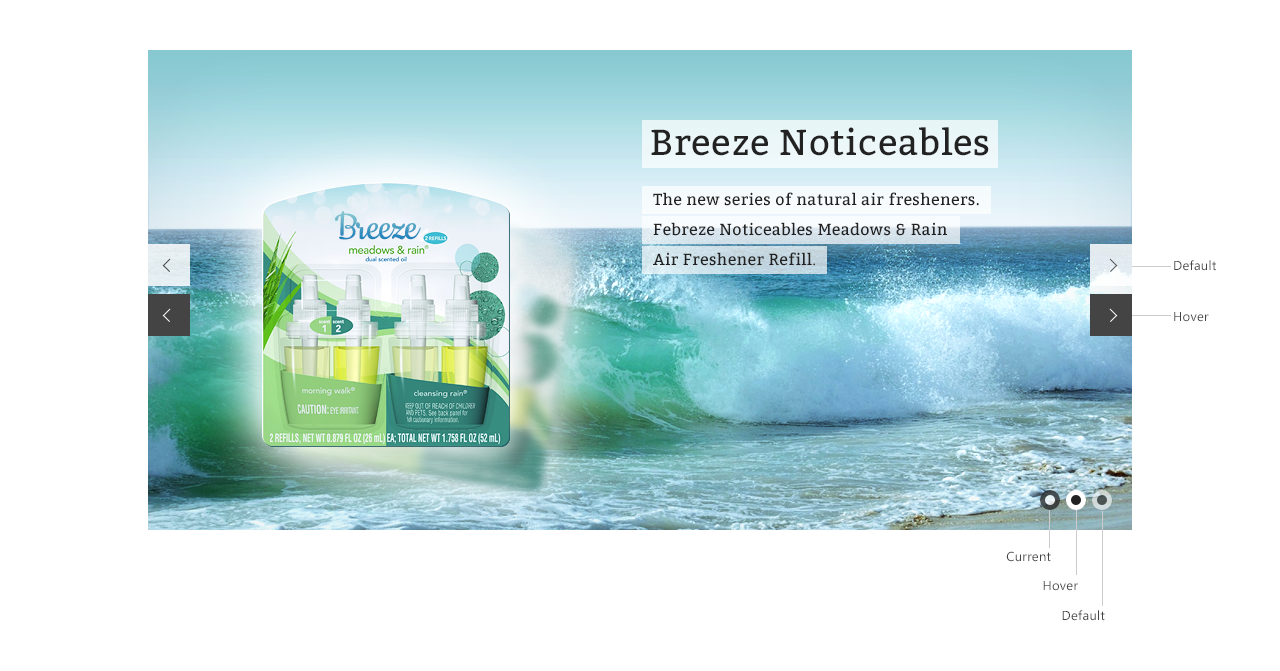
<style>
.page{position:relative;width:1280px;height:671px;background:#ffffff}
.page>*{position:absolute;margin:0}
.t1{font:36px "Bitter-Regular";letter-spacing:0.025em;color:#222222}
.t2{font:16px/30px "Bitter-Regular";letter-spacing:0.025em;color:#222222}
.t3{font:16px/30px "MinionPro-Regular";letter-spacing:0.025em;color:#222222}
.t4{font:45px "Cookie-Regular"}
.t5{font:13px "SegoeUI";letter-spacing:0.025em;color:#444444}
</style>
<div class="page">
<p class="t1" style="left:651px;top:127px;width:338px;height:29px">Breeze Noticeables</p>
<p class="t2" style="left:653px;top:192px;width:326px;height:74px">The new series of natural air fresheners. <br>Febreze Noticeables Meadows &amp; Rain <br>Air Freshener Refill<span class="t3">.</span></p>
<p class="t4" style="left:335px;top:211px;width:86px;height:29px">Breeze</p>
<p class="t5" style="left:1174px;top:260px;width:42px;height:11px">Default</p>
<p class="t5" style="left:1174px;top:312px;width:35px;height:10px">Hover</p>
<p class="t5" style="left:1006px;top:551px;width:45px;height:11px">Current</p>
<p class="t5" style="left:1043px;top:581px;width:35px;height:10px">Hover</p>
<p class="t5" style="left:1062px;top:610px;width:43px;height:11px">Default</p>
</div>
